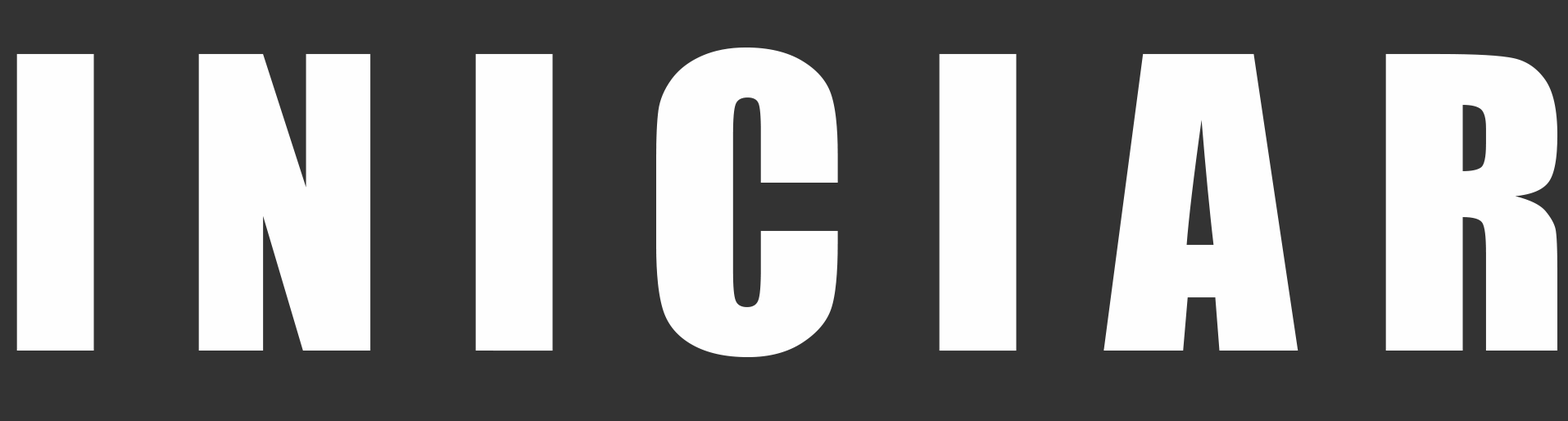
<style>
.page{position:relative;width:1568px;height:421px;background:#333333}
.page>*{position:absolute;margin:0}
.t1{font:375.3px "Impact";letter-spacing:0.2em;color:#fefefe;text-transform:uppercase}
</style>
<div class="page">
<p class="t1" style="left:16px;top:47px;width:1541px;height:310px">iniciar</p>
</div>
